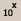
<style>
.page{position:relative;width:21px;height:21px;background:#d9cdc1}
.page>*{position:absolute;margin:0}
.t1{font:9px "Tahoma";color:#000000}
</style>
<div class="page">
<p class="t1" style="left:12px;top:3px;width:5px;height:5px">x</p>
<p class="t1" style="left:3px;top:9px;width:10px;height:8px">10</p>
</div>
